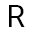
<style>
.page{position:relative;width:32px;height:32px;background:#ffffff}
.page>*{position:absolute;margin:0}
.t1{font:30px "Roboto-Regular";letter-spacing:0.01em;color:#000000}
</style>
<div class="page">
<p class="t1" style="left:9px;top:5px;width:16px;height:22px">R</p>
</div>
